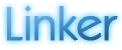
<style>
.page{position:relative;width:122px;height:50px;background:#ffffff}
.page>*{position:absolute;margin:0}
.t1{font:48px "KabelITCbyBT-Book";font-weight:bold}
</style>
<div class="page">
<p class="t1" style="left:7px;top:6px;width:111px;height:35px">Linker</p>
</div>
